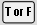
<style>
.page{position:relative;width:37px;height:25px;background:#f0f0f0}
.page>*{position:absolute;margin:0}
.t1{font:12.8px "Tahoma";color:#000000;font-weight:bold;scale:0.6 1}
</style>
<div class="page">
<p class="t1" style="left:5px;top:7px;width:26px;height:9px">T or F</p>
</div>
